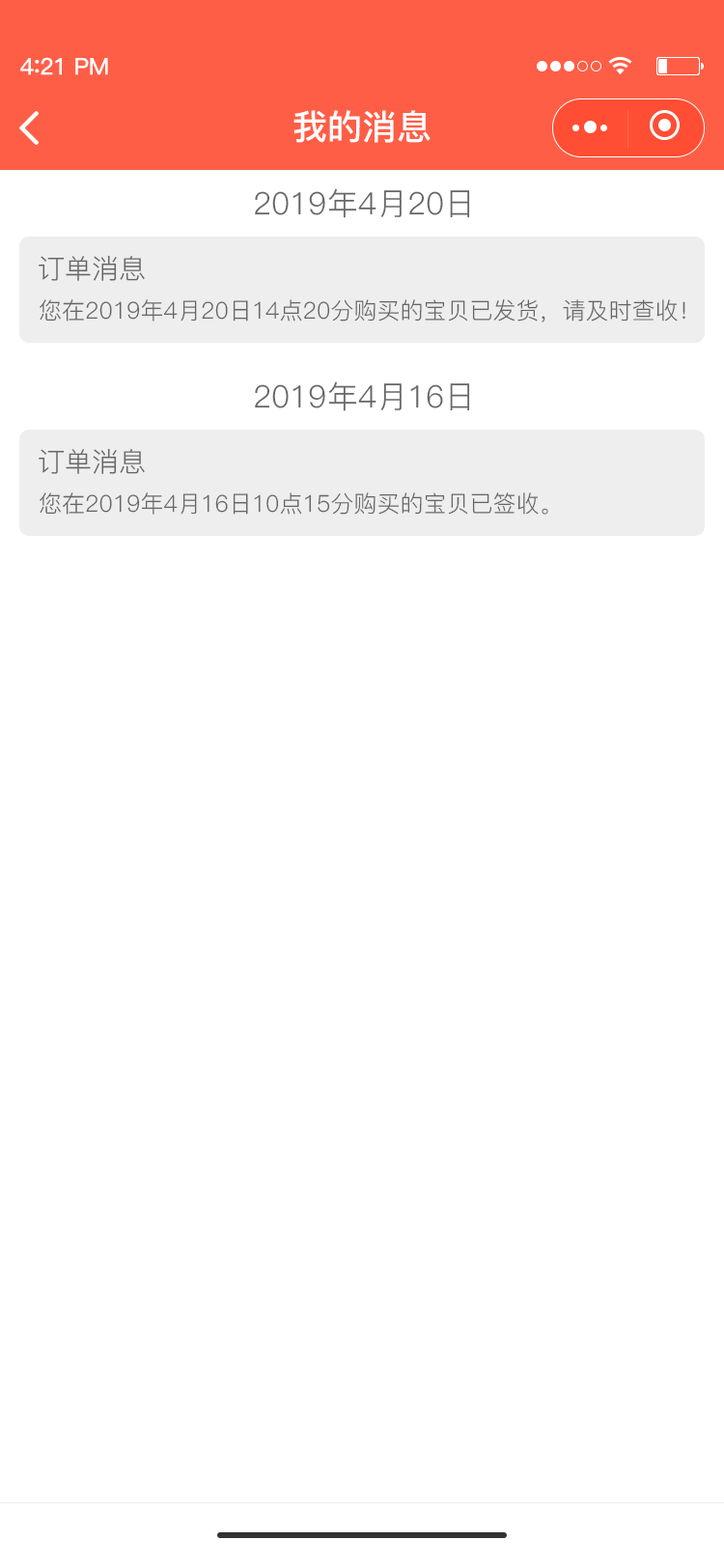
<style>
.page{position:relative;width:724px;height:1568px;background:#ffffff}
.page>*{position:absolute;margin:0}
.t1{font:23.2px "PingFang-SC-Bold";letter-spacing:-0.02em;color:#fefefe}
.t2{font:25.1px "PingFang-SC-Bold";letter-spacing:-0.02em;color:#fefefe}
.t3{font:34.8px "PingFang-SC-Bold";color:#ffffff}
.t4{font:30.9px "PingFang-SC-Regular";color:#666666}
.t5{font:27px "PingFang-SC-Regular";color:#666666}
.t6{font:23.2px "PingFang-SC-Regular";color:#666666}
</style>
<div class="page">
<p class="t1" style="left:20px;top:57px;width:88px;height:18px">4<span class="t2">:</span>21 PM</p>
<p class="t3" style="left:294px;top:110px;width:137px;height:33px">我的消息</p>
<p class="t4" style="left:255px;top:188px;width:215px;height:30px">2019年4月20日</p>
<p class="t5" style="left:39px;top:255px;width:106px;height:26px">订单消息</p>
<p class="t6" style="left:40px;top:299px;width:646px;height:23px">您在2019年4月20日14点20分购买的宝贝已发货，请及时查收！</p>
<p class="t4" style="left:255px;top:381px;width:215px;height:30px">2019年4月16日</p>
<p class="t5" style="left:39px;top:448px;width:106px;height:26px">订单消息</p>
<p class="t6" style="left:40px;top:492px;width:508px;height:23px">您在2019年4月16日10点15分购买的宝贝已签收。</p>
</div>
